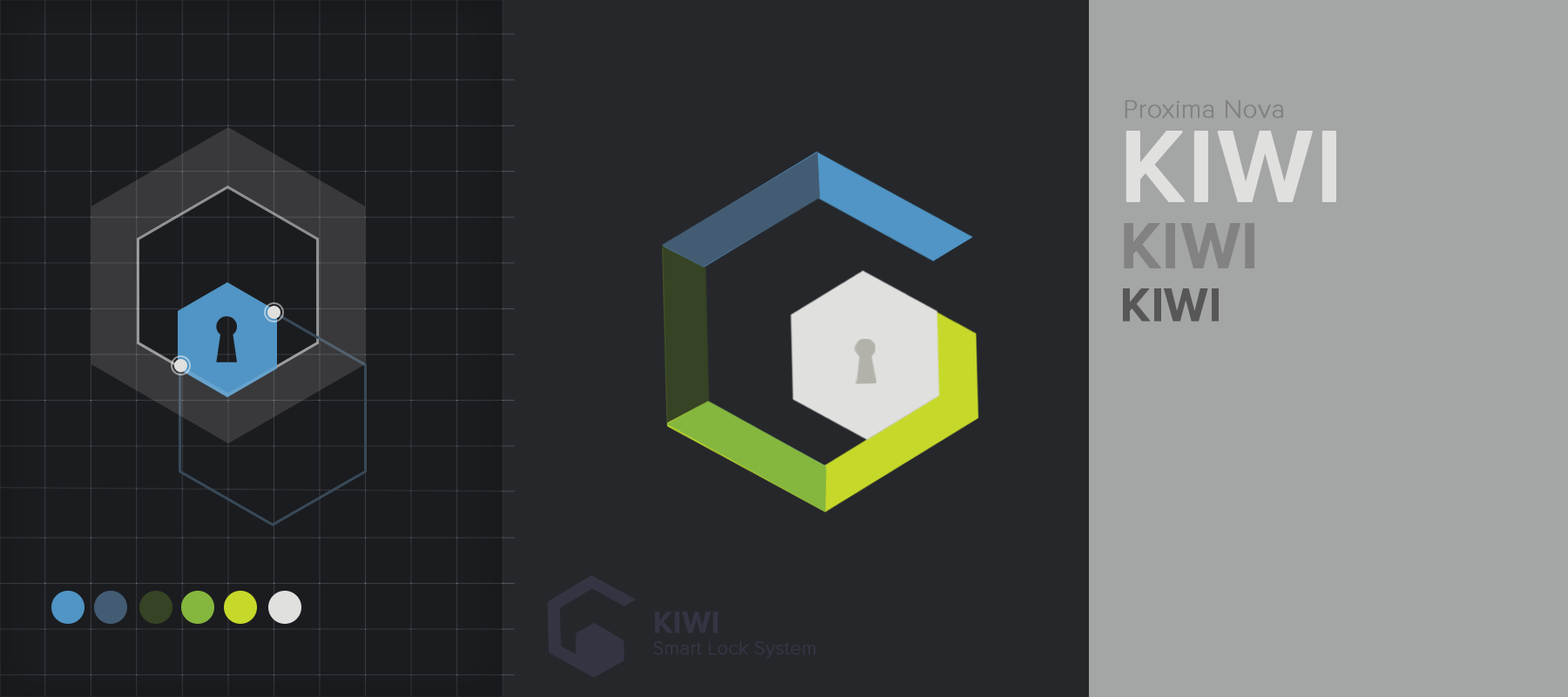
<style>
.page{position:relative;width:1568px;height:697px;background:#25272b}
.page>*{position:absolute;margin:0}
.t1{font:26.1px "ProximaNovaT-Thin";color:#818181;font-weight:bold}
.t2{font:104.8px "ProximaNova-Semibold";color:#e0e0de;font-weight:bold}
.t3{font:64.9px "ProximaNova-Semibold";color:#828282;font-weight:bold}
.t4{font:47.6px "ProximaNova-Semibold";color:#575757;font-weight:bold}
.t5{font:31.3px "ProximaNova-Semibold";color:#333543;font-weight:bold}
.t6{font:19.3px "ProximaNovaT-Thin";color:#333543;font-weight:bold}
</style>
<div class="page">
<p class="t1" style="left:1125px;top:100px;width:158px;height:18px">Proxima Nova</p>
<p class="t2" style="left:1125px;top:131px;width:211px;height:71px">KIWI</p>
<p class="t3" style="left:1124px;top:223px;width:130px;height:45px">KIWI</p>
<p class="t4" style="left:1123px;top:288px;width:96px;height:33px">KIWI</p>
<p class="t5" style="left:654px;top:612px;width:64px;height:21px">KIWI</p>
<p class="t6" style="left:653px;top:641px;width:162px;height:18px">Smart Lock System</p>
</div>
